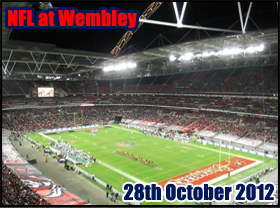
<style>
.page{position:relative;width:280px;height:208px}
.page>*{position:absolute;margin:0}
.t1{font:20px "Impact";letter-spacing:0.01em;color:#ff0101}
.t2{font:20px "Impact";letter-spacing:0.01em;color:#011858}
</style>
<div class="page">
<p class="t1" style="left:8px;top:10px;width:129px;height:18px">NFL at Wembley</p>
<p class="t2" style="left:124px;top:183px;width:150px;height:18px">28th October 2012</p>
</div>
